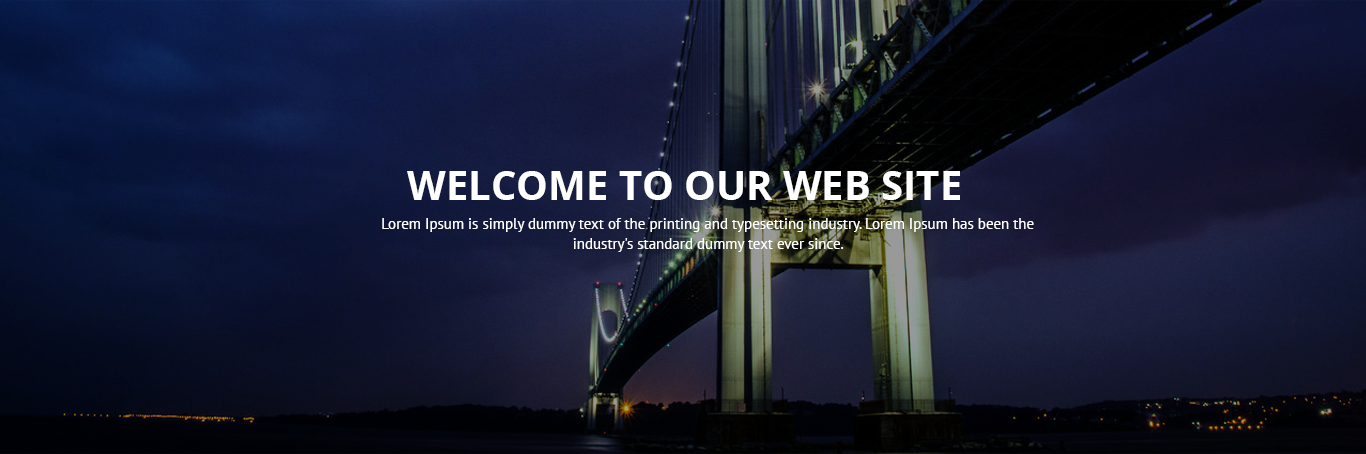
<style>
.page{position:relative;width:1366px;height:454px}
.page>*{position:absolute;margin:0}
.t1{font:40px "OpenSans-Bold";color:#ffffff;text-transform:uppercase}
.t2{font:15px/20px "PTSans-Regular";color:#ffffff}
</style>
<div class="page">
<p class="t1" style="left:407px;top:171px;width:553px;height:29px">Welcome to our web site</p>
<p class="t2" style="left:382px;top:218px;width:652px;height:34px;text-align:center">Lorem Ipsum is simply dummy text of the printing and typesetting industry. Lorem Ipsum has been the industry's standard dummy text ever since.</p>
</div>
